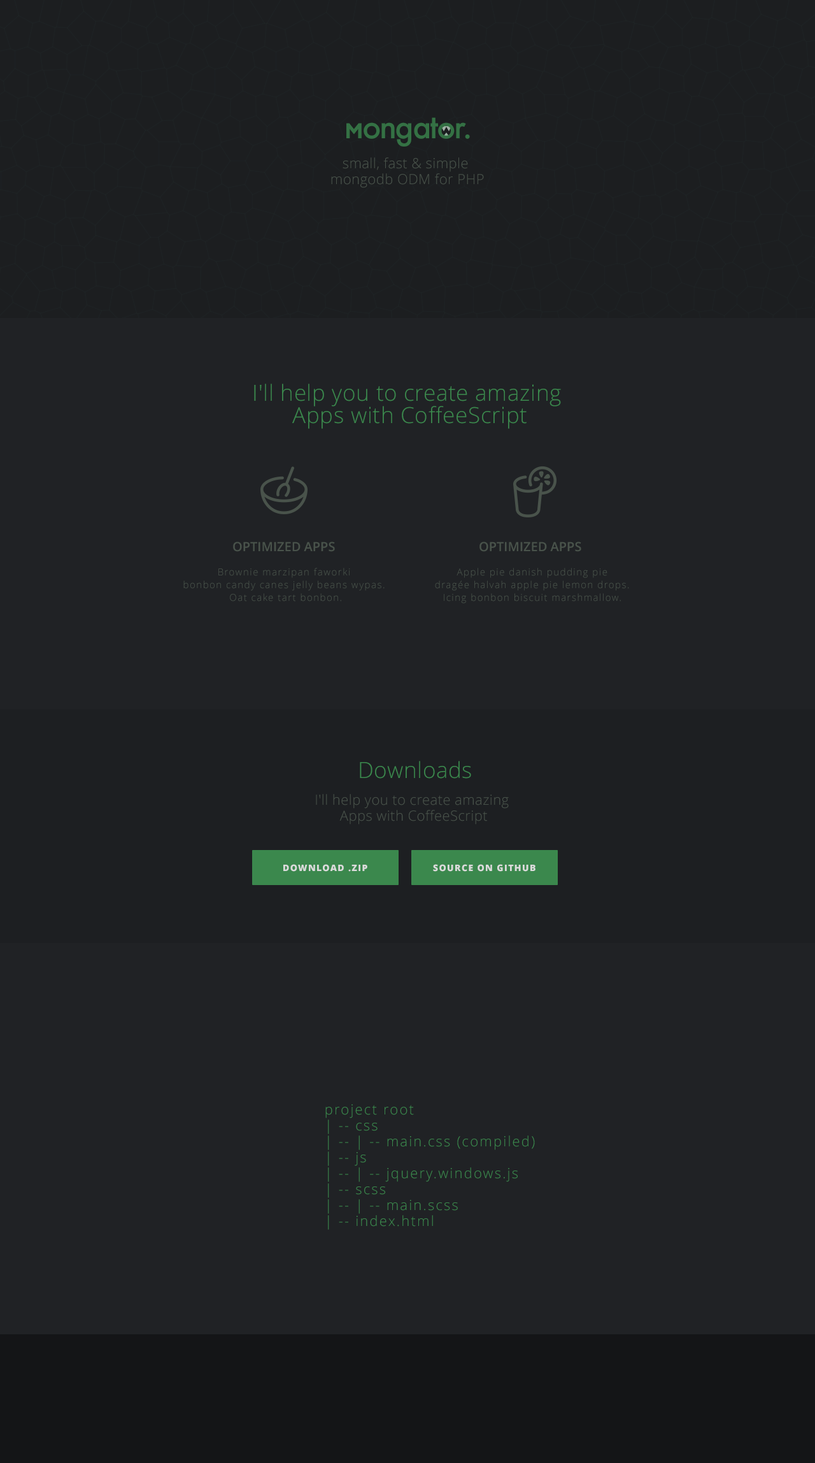
<style>
.page{position:relative;width:815px;height:1463px;background:#202225}
.page>*{position:absolute;margin:0}
.t1{font:21.7px "GillSansDisplayMTPro-Bold";letter-spacing:-0.04em;color:#347144;text-transform:uppercase}
.t2{font:35.7px "FuturaTEE-Medi";letter-spacing:-0.04em;color:#347144}
.t3{font:14px/15.9px "OpenSans-Light";letter-spacing:0.02em;color:#49534b}
.t4{font:22.3px/22.3px "OpenSans-Light";letter-spacing:0.02em;color:#3b884d}
.t5{font:12.7px "OpenSans-Semibold";color:#49534b;text-transform:uppercase}
.t6{font:9.6px/12.7px "OpenSans-Light";letter-spacing:0.1em;color:#49534b}
.t7{font:22.3px "OpenSans-Light";letter-spacing:0.02em;color:#3b884d}
.t8{font:8.9px "OpenSans-Extrabold";letter-spacing:0.1em;color:#dbdbdb}
.t9{font:14px/15.9px "OpenSans-Light";letter-spacing:0.1em;color:#3b884d}
</style>
<div class="page">
<p class="t1" style="left:347px;top:123px;width:15px;height:15px">M</p>
<p class="t2" style="left:364px;top:117px;width:106px;height:30px">ongator.</p>
<p class="t3" style="left:331px;top:157px;width:153px;height:31px;text-align:center">small, fast &amp; simple <br>mongodb ODM for PHP</p>
<p class="t4" style="left:254px;top:383px;width:307px;height:46px;text-align:center">I'll help you to create amazing <br>Apps with CoffeeScript</p>
<p class="t5" style="left:233px;top:541px;width:102px;height:11px">Optimized Apps</p>
<p class="t5" style="left:480px;top:541px;width:102px;height:11px">Optimized Apps</p>
<p class="t6" style="left:183px;top:568px;width:202px;height:33px;text-align:center">Brownie marzipan faworki <br>bonbon candy canes jelly beans wypas. <br>Oat cake tart bonbon.</p>
<p class="t6" style="left:435px;top:568px;width:194px;height:35px;text-align:center">Apple pie danish pudding pie<br> dragée halvah apple pie lemon drops. <br>Icing bonbon biscuit marshmallow.</p>
<p class="t7" style="left:360px;top:761px;width:111px;height:17px">Downloads</p>
<p class="t3" style="left:316px;top:794px;width:193px;height:30px;text-align:center">I'll help you to create amazing <br>Apps with CoffeeScript</p>
<p class="t8" style="left:283px;top:864px;width:85px;height:7px">DOWNLOAD .ZIP</p>
<p class="t8" style="left:433px;top:864px;width:103px;height:7px">SOURCE ON GITHUB</p>
<p class="t9" style="left:325px;top:1104px;width:210px;height:125px">project root<br>| -- css<br>| -- | -- main.css (compiled)<br>| -- js<br>| -- | -- jquery.windows.js<br>| -- scss<br>| -- | -- main.scss<br>| -- index.html</p>
</div>
